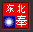
<style>
.page{position:relative;width:33px;height:32px;background:#f20000}
.page>*{position:absolute;margin:0}
.t1{font:10.4px "SimSun";color:#ffffff}
.t2{font:11.7px "SimSun";color:#ffffff}
</style>
<div class="page">
<p class="t1" style="left:6px;top:4px;width:19px;height:9px">东北</p>
<p class="t2" style="left:16px;top:15px;width:11px;height:12px">奉</p>
</div>
